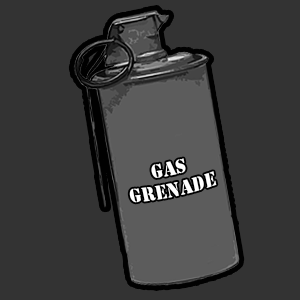
<style>
.page{position:relative;width:300px;height:300px;background:#333333}
.page>*{position:absolute;margin:0}
.t1{font:17.9px "StencilStd";color:#ffffff;text-transform:uppercase}
</style>
<div class="page">
<p class="t1" style="left:129px;top:158px;width:88px;height:45px;text-align:center;rotate:-12deg">GAS<br>GRENADE</p>
</div>
